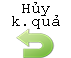
<style>
.page{position:relative;width:71px;height:58px;background:#ffffff}
.page>*{position:absolute;margin:0}
.t1{font:12px/13.3px "CourierNewPSMT";color:#000000}
</style>
<div class="page">
<p class="t1" style="left:12px;top:2px;width:48px;height:27px;text-align:center">Hủy<br>k.quả</p>
</div>
